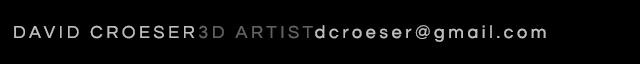
<style>
.page{position:relative;width:640px;height:64px;background:#000000}
.page>*{position:absolute;margin:0}
.t1{font:18px "Questrial-Regular";letter-spacing:0.2em;color:#bebebe}
</style>
<div class="page">
<p class="t1" style="left:14px;top:25px;width:532px;height:17px">DAVID CROESER3D ARTISTdcroeser@gmail.com</p>
</div>
